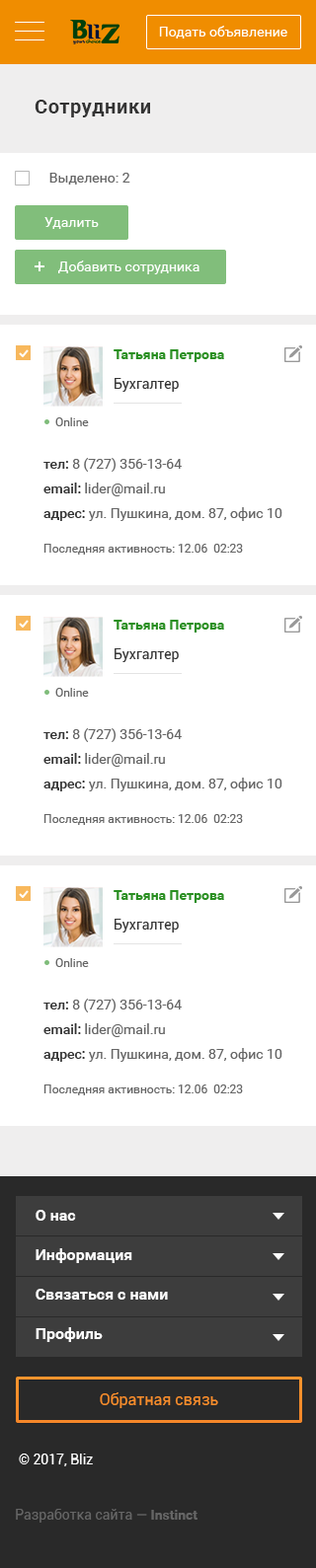
<style>
.page{position:relative;width:316px;height:1568px;background:#ffffff}
.page>*{position:absolute;margin:0}
.t1{font:19.7px "Roboto-Bold";letter-spacing:0.03em;color:#333333}
.t2{font:13.8px "Roboto-Regular";color:#666666}
.t3{font:13.8px "Roboto-Regular";color:#ffffff}
.t4{font:13.8px/25.7px "Roboto-Bold";color:#2a8f22}
.t5{font:13.8px/19.7px "Roboto-Regular";color:#333333}
.t6{font:11.8px "Roboto-Regular";color:#666666}
.t7{font:13.8px/19.7px "Roboto-Regular";color:#666666}
.t8{font:13.8px/19.7px "Roboto-Medium";color:#333333}
</style>
<div class="page">
<p class="t1" style="left:35px;top:100px;width:115px;height:17px">Сотрудники</p>
<p class="t2" style="left:49px;top:173px;width:81px;height:12px">Выделено: 2</p>
<p class="t3" style="left:44px;top:217px;width:55px;height:12px">Удалить</p>
<p class="t3" style="left:58px;top:261px;width:141px;height:13px">Добавить сотрудника</p>
<p class="t4" style="left:113px;top:349px;width:111px;height:43px">Татьяна Петрова<br><span class="t5">Бухгалтер</span></p>
<p class="t6" style="left:55px;top:417px;width:34px;height:9px">Online</p>
<p class="t7" style="left:43px;top:458px;width:239px;height:63px"><span class="t8">тел: </span>8 (727) 356-13-64<br><span class="t8">email:</span> lider@mail.ru<br><span class="t8">адрес: </span>ул. Пушкина, дом. 87, офис 10</p>
<p class="t6" style="left:43px;top:544px;width:200px;height:11px">Последняя активность: 12.06  02:23</p>
<p class="t4" style="left:113px;top:620px;width:111px;height:42px">Татьяна Петрова<br><span class="t5">Бухгалтер</span></p>
<p class="t6" style="left:55px;top:688px;width:34px;height:9px">Online</p>
<p class="t7" style="left:43px;top:728px;width:239px;height:63px"><span class="t8">тел: </span>8 (727) 356-13-64<br><span class="t8">email:</span> lider@mail.ru<br><span class="t8">адрес: </span>ул. Пушкина, дом. 87, офис 10</p>
<p class="t6" style="left:43px;top:814px;width:200px;height:11px">Последняя активность: 12.06  02:23</p>
<p class="t4" style="left:113px;top:890px;width:111px;height:43px">Татьяна Петрова<br><span class="t5">Бухгалтер</span></p>
<p class="t6" style="left:55px;top:958px;width:34px;height:9px">Online</p>
<p class="t7" style="left:43px;top:999px;width:239px;height:63px"><span class="t8">тел: </span>8 (727) 356-13-64<br><span class="t8">email:</span> lider@mail.ru<br><span class="t8">адрес: </span>ул. Пушкина, дом. 87, офис 10</p>
<p class="t6" style="left:43px;top:1084px;width:200px;height:11px">Последняя активность: 12.06  02:23</p>
</div>
